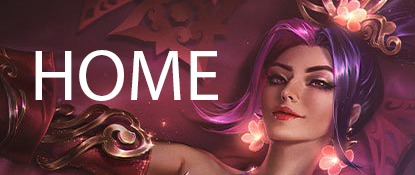
<style>
.page{position:relative;width:415px;height:175px}
.page>*{position:absolute;margin:0}
.t1{font:72px "MyriadPro-Regular";color:#ffffff}
</style>
<div class="page">
<p class="t1" style="left:35px;top:50px;width:183px;height:51px">HOME</p>
</div>
